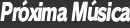
<style>
.page{position:relative;width:130px;height:28px;background:#333333}
.page>*{position:absolute;margin:0}
.t1{font:24.7px "RodinPro-EB";letter-spacing:-0.075em;color:#ffffff;font-style:italic;scale:0.72 1}
</style>
<div class="page">
<p class="t1" style="left:0px;top:0px;width:131px;height:22px">Próxima Música</p>
</div>
